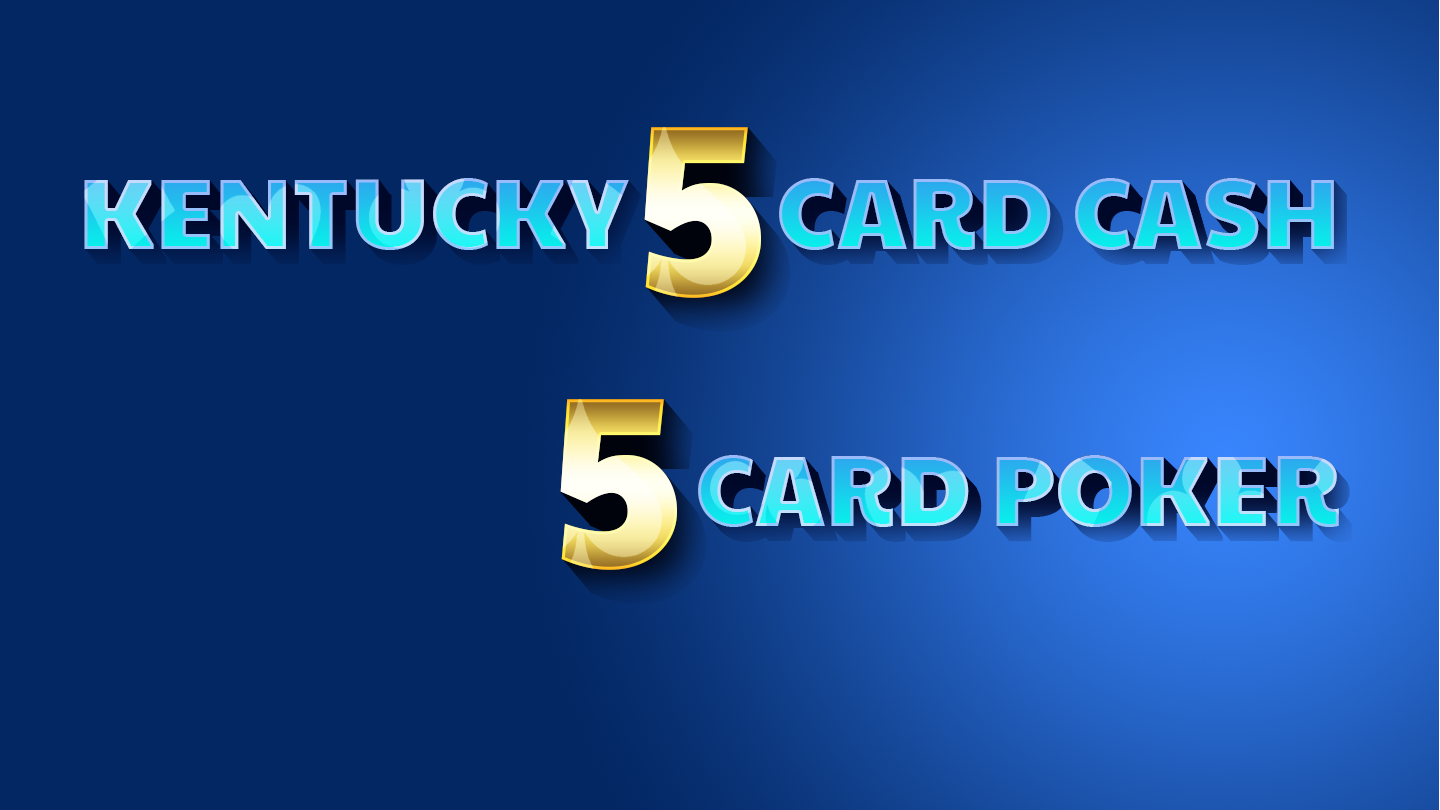
<style>
.page{position:relative;width:1440px;height:810px;background:#032763}
.page>*{position:absolute;margin:0}
.t1{font:250px "PaytoneOne-Regular"}
.t2{font:100px "PaytoneOne-Regular"}
</style>
<div class="page">
<p class="t1" style="left:644px;top:127px;width:117px;height:171px">5</p>
<p class="t2" style="left:84px;top:178px;width:545px;height:72px">KENTUCKY</p>
<p class="t2" style="left:779px;top:178px;width:555px;height:72px">CARD CASH</p>
<p class="t1" style="left:560px;top:399px;width:117px;height:171px">5</p>
<p class="t2" style="left:698px;top:455px;width:641px;height:72px">CARD POKER</p>
</div>
